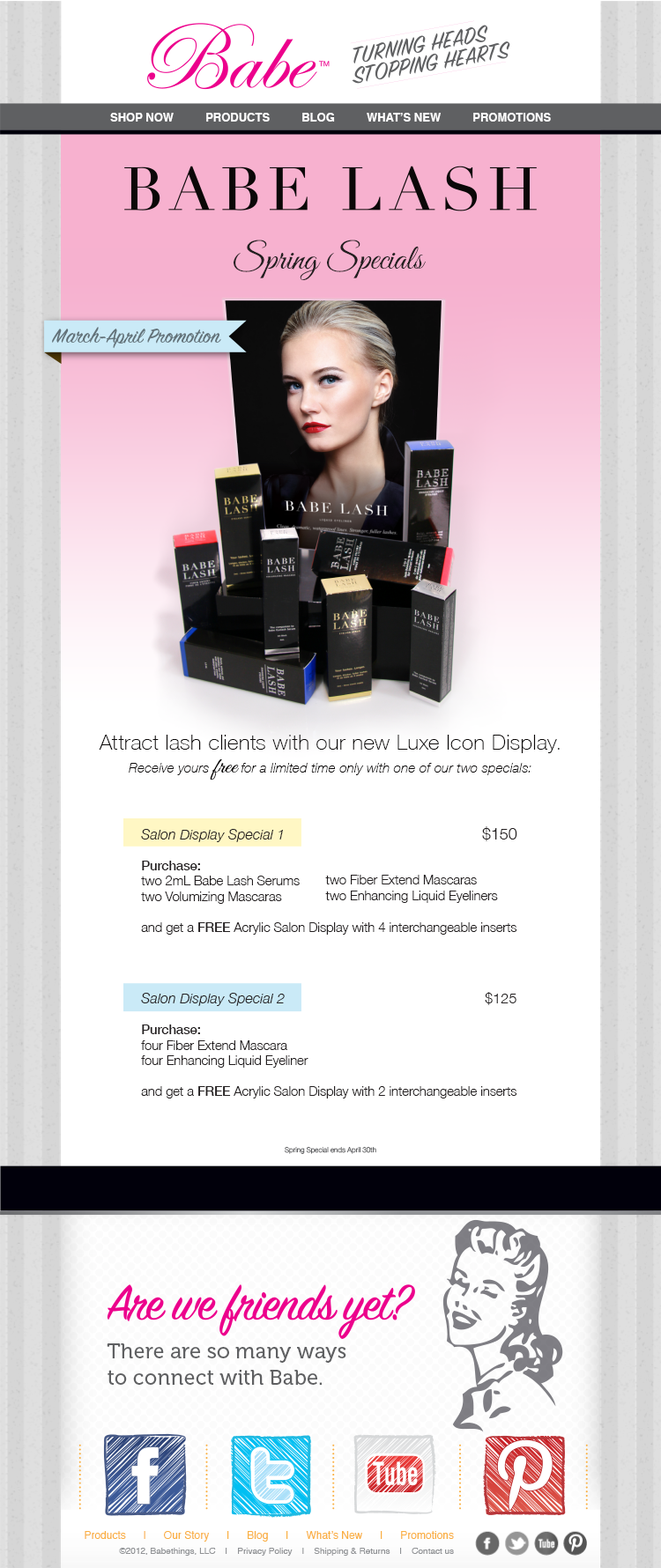
<style>
.page{position:relative;width:661px;height:1568px;background:#ffffff}
.page>*{position:absolute;margin:0}
.t1{font:11.5px "Helvetica-Bold";color:#ffffff}
.t2{font:35.2px "GreatVibes-Regular";color:#231f20}
.t3{font:22.9px "SignPainter-HouseScript";color:#627178}
.t4{font:21.1px "HelveticaNeue-Thin";letter-spacing:0.025em;color:#0b0808}
.t5{font:13.2px "HelveticaNeue-ThinItalic";letter-spacing:0.025em;color:#0b0808}
.t6{font:21.1px "GreatVibes-Regular";color:#0b0808;scale:1.15 1}
.t7{font:12.9px "HelveticaNeue-Light";color:#231f20}
.t8{font:14.3px "HelveticaNeue-LightItalic";color:#231f20}
.t9{font:15.7px/19.7px "HelveticaNeue-Light";color:#231f20}
.t10{font:12.9px "HelveticaNeue-Medium";color:#231f20}
.t11{font:14.3px/19.7px "HelveticaNeue-Light";color:#231f20}
.t12{font:7px "HelveticaNeue-Light";color:#5f6062}
.t13{font:21.1px/26.4px "Museo-500";color:#5f6062}
.t14{font:10.6px "Helvetica";color:#faaf40}
.t15{font:8.8px "Helvetica";color:#919396}
</style>
<div class="page">
<p class="t1" style="left:110px;top:113px;width:441px;height:9px">SHOP NOW          PRODUCTS          BLOG          WHAT’S NEW          PROMOTIONS</p>
<p class="t2" style="left:233px;top:240px;width:192px;height:40px">Spring Specials</p>
<p class="t3" style="left:52px;top:327px;width:169px;height:22px">March-April Promotion</p>
<p class="t4" style="left:99px;top:735px;width:460px;height:18px">Attract lash clients with our new Luxe Icon Display.</p>
<p class="t5" style="left:129px;top:759px;width:402px;height:21px">Receive yours <span class="t6">free </span>for a limited time only with one of our two specials:</p>
<p class="t7" style="left:141px;top:826px;width:376px;height:109px;text-align:right"><span class="t8">Salon Display Special 1    </span><span class="t9">$150<br><br></span><span class="t10">Purchase:<br></span>two 2mL Babe Lash Serums<br>two Volumizing Mascaras<br><br>and get a <span class="t10">FREE </span>Acrylic Salon Display with 4 interchangeable inserts</p>
<p class="t7" style="left:325px;top:875px;width:173px;height:28px">two Fiber Extend Mascaras<br>two Enhancing Liquid Eyeliners</p>
<p class="t7" style="left:141px;top:992px;width:376px;height:106px;text-align:right"><span class="t8">Salon Display Special 2 </span><span class="t11">$125<br><br></span><span class="t10">Purchase:<br></span>four Fiber Extend Mascara<br>four Enhancing Liquid Eyeliner<br><br>and get a <span class="t10">FREE </span>Acrylic Salon Display with 2 interchangeable inserts</p>
<p class="t12" style="left:285px;top:1147px;width:91px;height:7px">Spring Special ends April 30th</p>
<p class="t13" style="left:107px;top:1343px;width:239px;height:42px">There are so many ways to connect with Babe.</p>
<p class="t14" style="left:85px;top:1531px;width:369px;height:11px">Products      |      Our Story      |      Blog      |      What’s New      |      Promotions</p>
<p class="t15" style="left:119px;top:1548px;width:335px;height:8px">©2012, Babethings, LLC    |    Privacy Policy    |    Shipping &amp; Returns    |    Contact us</p>
</div>
